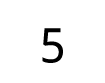
<style>
.page{position:relative;width:105px;height:83px;background:#ffffff}
.page>*{position:absolute;margin:0}
.t1{font:47.9px "DroidSans";color:#000000}
</style>
<div class="page">
<p class="t1" style="left:42px;top:28px;width:21px;height:35px">5</p>
</div>
